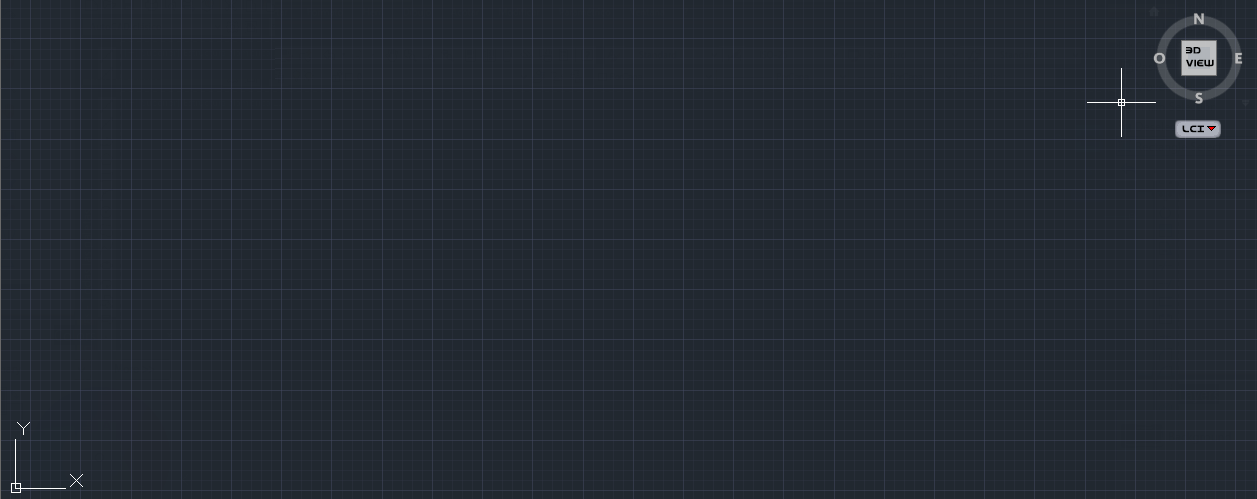
<style>
.page{position:relative;width:1257px;height:499px;background:#212830}
.page>*{position:absolute;margin:0}
.t1{font:10.7px "FederalService";color:#000000}
</style>
<div class="page">
<p class="t1" style="left:1186px;top:47px;width:28px;height:20px;text-align:justify">3D<br>View</p>
<p class="t1" style="left:1182px;top:125px;width:22px;height:8px">LCI</p>
</div>
